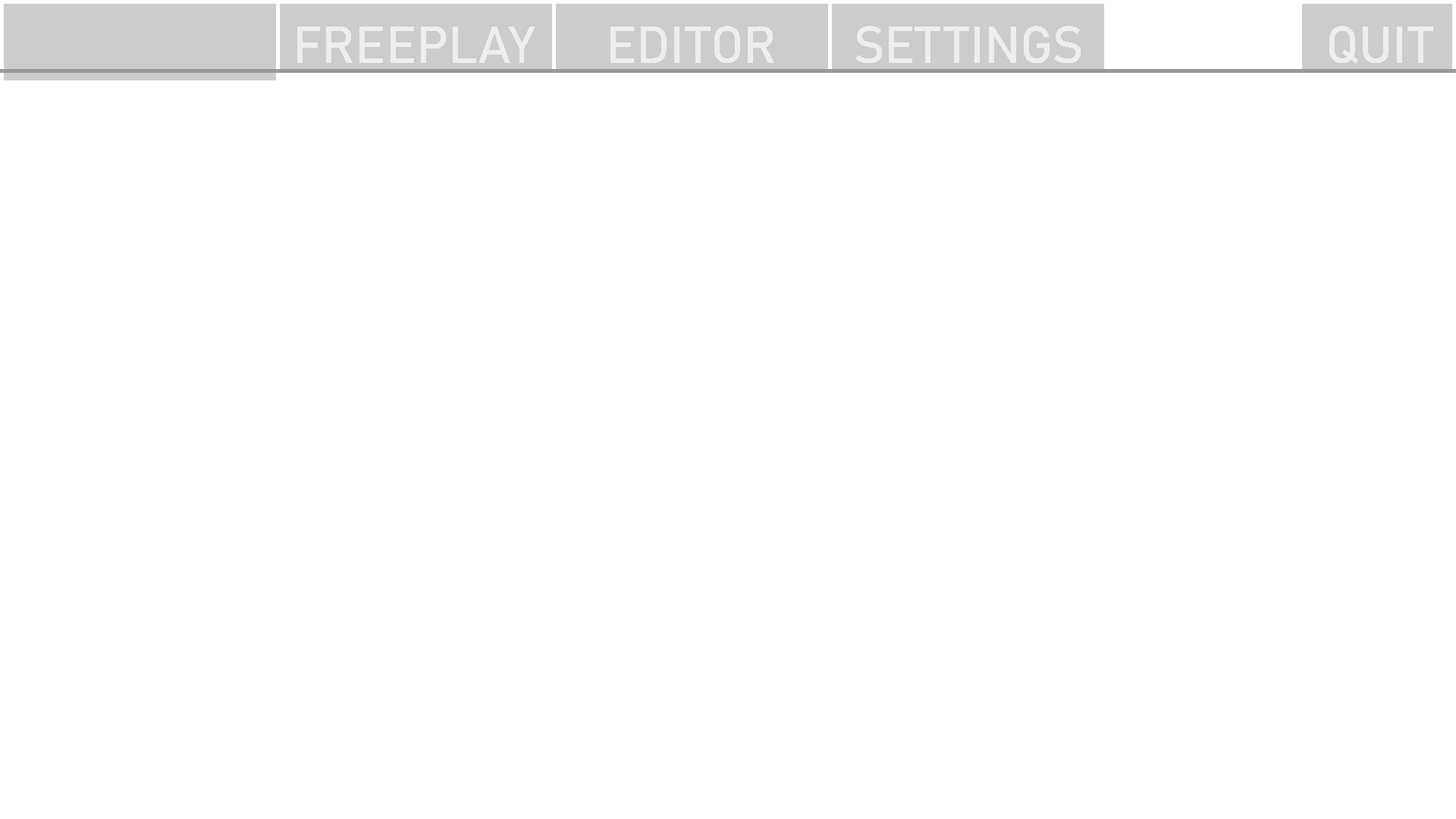
<style>
.page{position:relative;width:1456px;height:819px;background:#ffffff}
.page>*{position:absolute;margin:0}
.t1{font:51.4px "Bahnschrift";color:#eeeeee}
</style>
<div class="page">
<p class="t1" style="left:297px;top:27px;width:238px;height:36px">FREEPLAY</p>
<p class="t1" style="left:610px;top:26px;width:164px;height:37px">EDITOR</p>
<p class="t1" style="left:855px;top:26px;width:226px;height:37px">SETTINGS</p>
<p class="t1" style="left:1329px;top:26px;width:104px;height:38px">QUIT</p>
</div>
